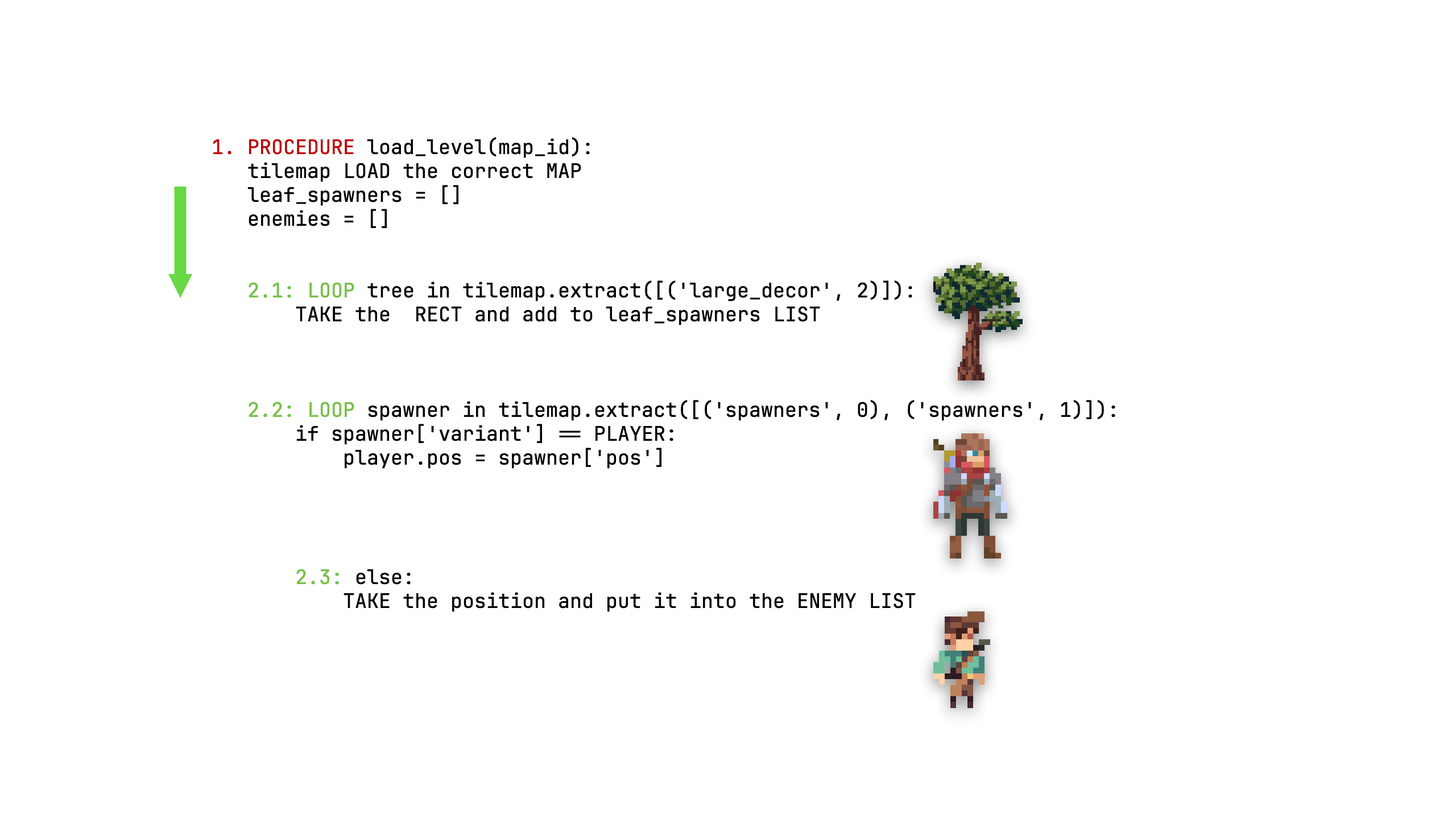
<style>
.page{position:relative;width:1456px;height:819px;background:#ffffff}
.page>*{position:absolute;margin:0}
.t1{font:19.9px "JetBrainsMono-Regular";color:#000000}
.t2{font:19.9px "JetBrainsMono-Regular";color:#c10101}
.t3{font:19.9px "JetBrainsMono-Regular";color:#78c148}
</style>
<div class="page">
<p class="t1" style="left:213px;top:137px;width:902px;height:475px"><span class="t2">1. PROCEDURE </span>load_level(map_id):<br>   tilemap LOAD the correct MAP<br>   leaf_spawners = []<br>   enemies = []<br><br><br>   <span class="t3">2.1: LOOP </span>tree in tilemap.extract([('large_decor', 2)]):<br>       TAKE the  RECT and add to leaf_spawners LIST<br><br><br>  <br>   <span class="t3">2.2: LOOP</span> spawner in tilemap.extract([('spawners', 0), ('spawners', 1)]):<br>       if spawner['variant'] == PLAYER:<br>           player.pos = spawner['pos']<br><br><br><br><br>       <span class="t3">2.3:</span> else:<br>           TAKE the position and put it into the ENEMY LIST</p>
</div>
